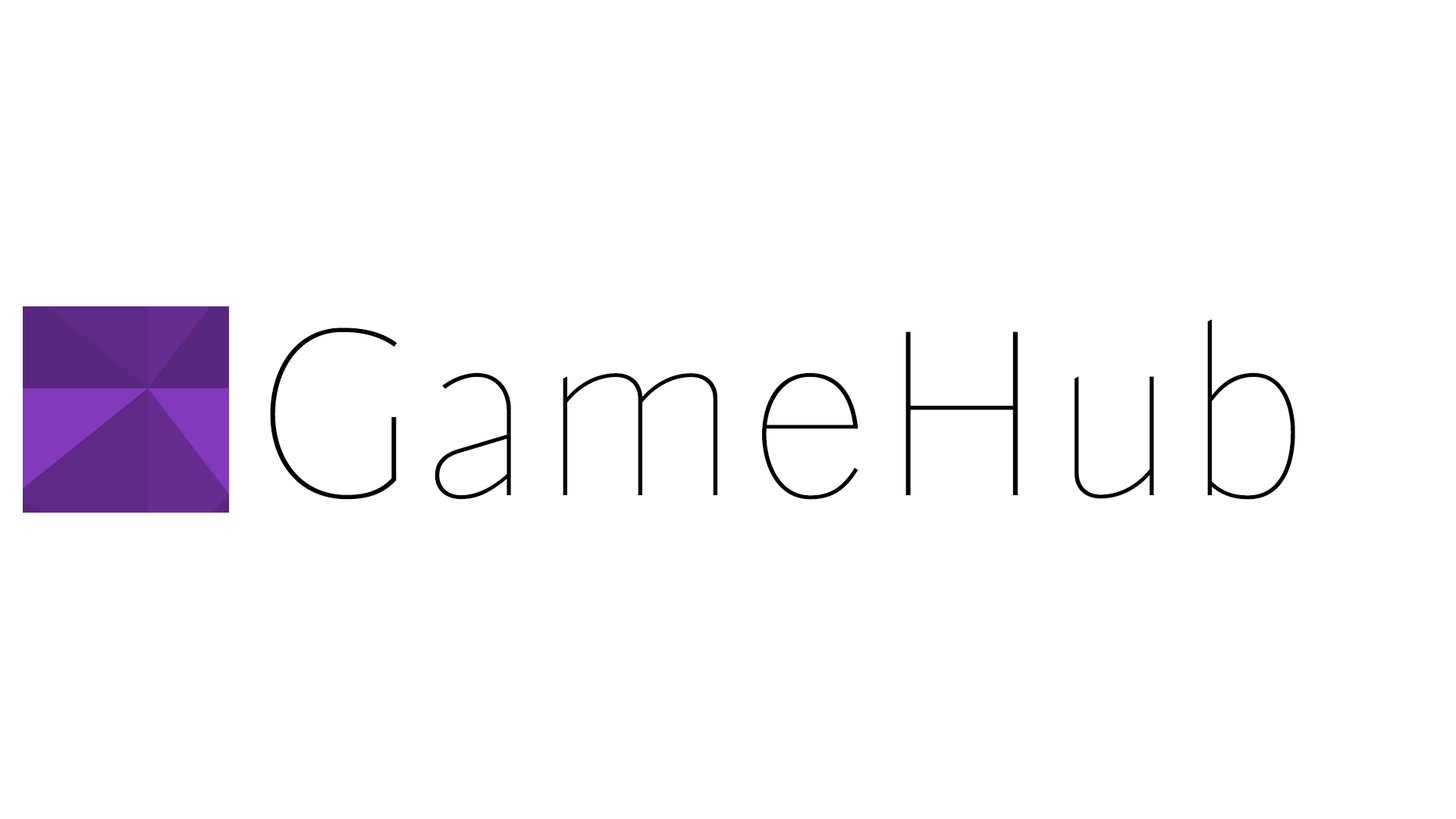
<style>
.page{position:relative;width:1456px;height:819px;background:#ffffff}
.page>*{position:absolute;margin:0}
.t1{font:265.4px "CintaThin";color:#000000}
</style>
<div class="page">
<p class="t1" style="left:270px;top:319px;width:1025px;height:181px">GameHub</p>
</div>
